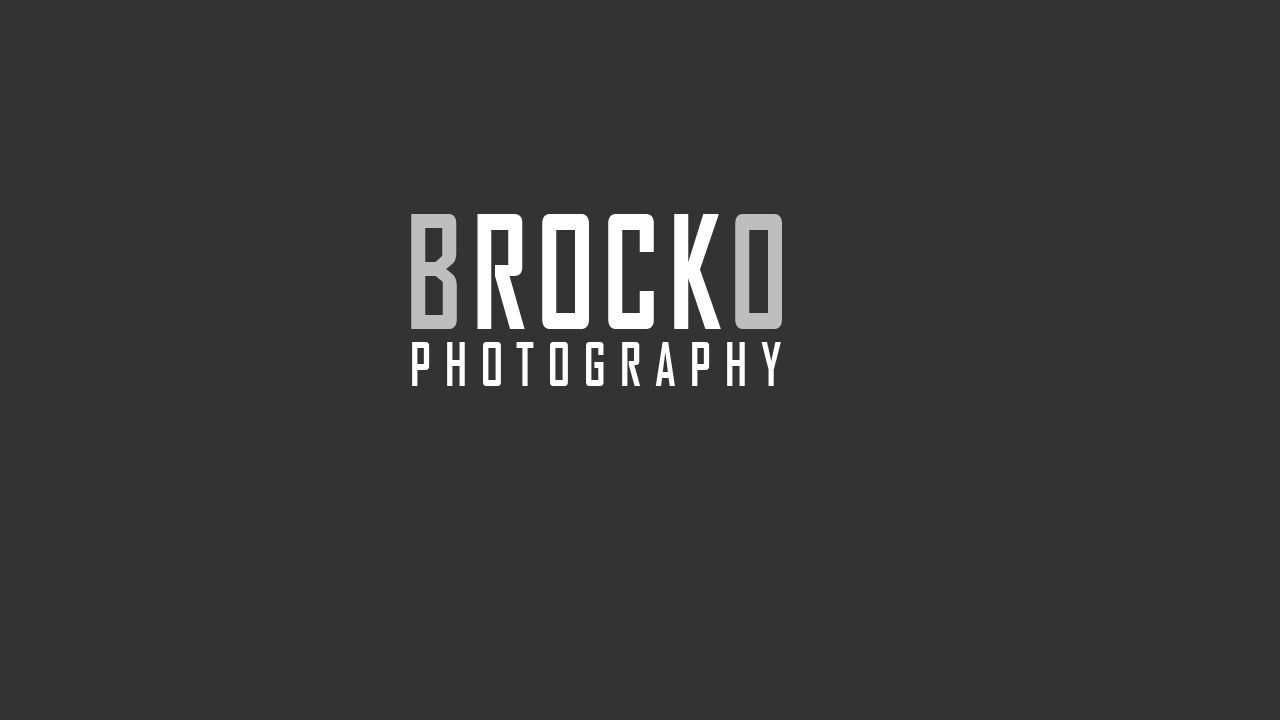
<style>
.page{position:relative;width:1280px;height:720px;background:#333333}
.page>*{position:absolute;margin:0}
.t1{font:150px "AgencyFB-Bold";letter-spacing:0.08em;color:#ffffff;text-transform:uppercase;scale:0.8 1}
.t2{font:150px "AgencyFB-Bold";letter-spacing:0.08em;color:#bebebe;text-transform:uppercase;scale:0.8 1}
.t3{font:58px "AgencyFB-Bold";letter-spacing:0.298em;color:#ffffff;text-transform:uppercase;scale:0.8 1}
</style>
<div class="page">
<p class="t1" style="left:411px;top:214px;width:371px;height:115px"><span class="t2">B</span>ROCK<span class="t2">O</span></p>
<p class="t3" style="left:412px;top:342px;width:369px;height:44px">PHOTOGRAPHY</p>
</div>
